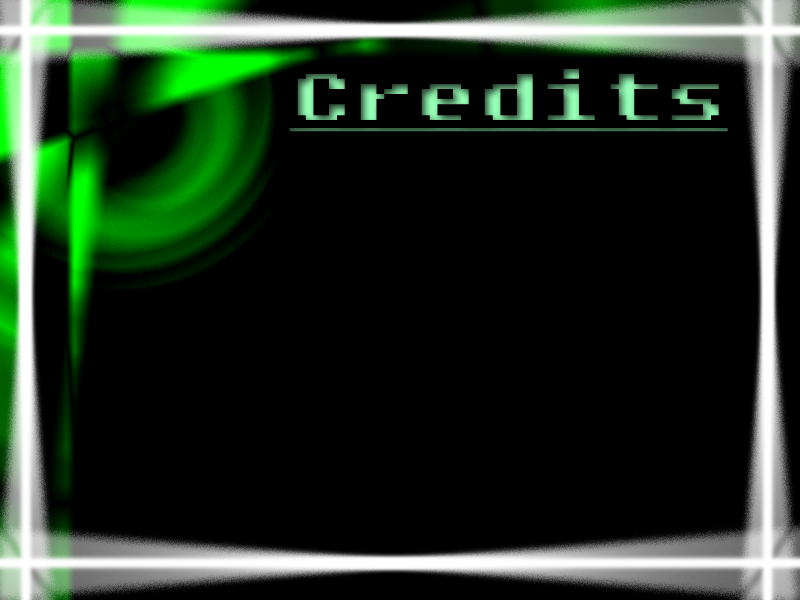
<style>
.page{position:relative;width:800px;height:600px;background:#000000}
.page>*{position:absolute;margin:0}
.t1{font:65px "Fixedsys";text-decoration:underline;scale:1.54 1}
</style>
<div class="page">
<p class="t1" style="left:289px;top:68px;width:439px;height:64px">Credits</p>
</div>
